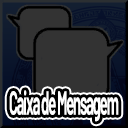
<style>
.page{position:relative;width:128px;height:128px;background:#333333}
.page>*{position:absolute;margin:0}
.t1{font:33.3px "Barlow-Bold";letter-spacing:-0.075em;color:#ffffff;scale:0.44 1}
</style>
<div class="page">
<p class="t1" style="left:9px;top:90px;width:110px;height:32px">Caixa de Mensagem</p>
</div>
